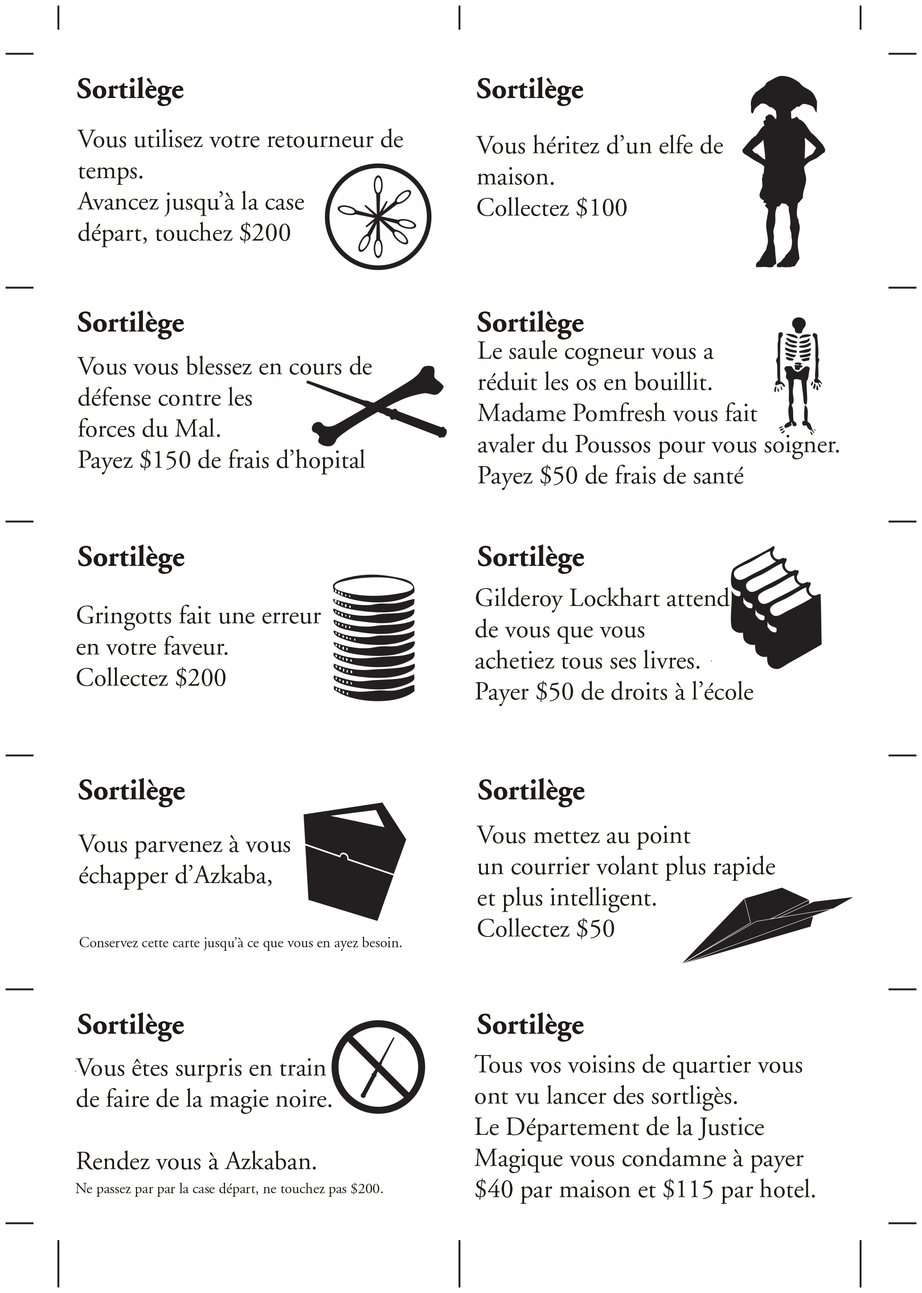
<style>
.page{position:relative;width:922px;height:1293px;background:#ffffff}
.page>*{position:absolute;margin:0}
.t1{font:29.7px "AGaramond-Bold";color:#1f1a17}
.t2{font:26px "AGaramond-Regular";color:#1f1a17}
.t3{font:14.9px "AGaramond-Regular";color:#1f1a17}
</style>
<div class="page">
<p class="t1" style="left:77px;top:77px;width:107px;height:29px">Sortilège</p>
<p class="t1" style="left:477px;top:77px;width:106px;height:29px">Sortilège</p>
<p class="t2" style="left:77px;top:128px;width:326px;height:119px">Vous utilisez votre retourneur de<br>temps.<br>Avancez jusqu’à la case<br>départ, touchez $200</p>
<p class="t2" style="left:476px;top:135px;width:247px;height:83px">Vous héritez d’un elfe de<br>maison.<br>Collectez $100</p>
<p class="t1" style="left:78px;top:310px;width:106px;height:30px">Sortilège</p>
<p class="t1" style="left:477px;top:310px;width:107px;height:30px">Sortilège</p>
<p class="t2" style="left:478px;top:340px;width:361px;height:150px">Le saule cogneur vous a<br>réduit les os en bouillit.<br>Madame Pomfresh vous fait<br>avaler du Poussos pour vous soigner.<br>Payez $50 de frais de santé</p>
<p class="t2" style="left:77px;top:356px;width:295px;height:119px">Vous vous blessez en cours de<br>défense contre les<br>forces du Mal.<br>Payez $150 de frais d’hopital</p>
<p class="t1" style="left:78px;top:545px;width:106px;height:29px">Sortilège</p>
<p class="t1" style="left:478px;top:545px;width:106px;height:29px">Sortilège</p>
<p class="t2" style="left:476px;top:587px;width:277px;height:119px">Gilderoy Lockhart attend<br>de vous que vous<br>achetiez tous ses livres.<br>Payer $50 de droits à l’école</p>
<p class="t2" style="left:77px;top:605px;width:244px;height:84px">Gringotts fait une erreur<br>en votre faveur.<br>Collectez $200</p>
<p class="t1" style="left:78px;top:778px;width:107px;height:30px">Sortilège</p>
<p class="t1" style="left:478px;top:778px;width:107px;height:30px">Sortilège</p>
<p class="t2" style="left:476px;top:826px;width:299px;height:113px">Vous mettez au point<br>un courrier volant plus rapide<br>et plus intelligent.<br>Collectez $50</p>
<p class="t2" style="left:78px;top:835px;width:212px;height:55px">Vous parvenez à vous<br>échapper d’Azkaba,</p>
<p class="t3" style="left:79px;top:937px;width:323px;height:14px">Conservez cette carte jusqu’à ce que vous en ayez besoin.</p>
<p class="t1" style="left:78px;top:1013px;width:106px;height:29px">Sortilège</p>
<p class="t1" style="left:477px;top:1013px;width:107px;height:29px">Sortilège</p>
<p class="t2" style="left:75px;top:1058px;width:257px;height:112px">Vous êtes surpris en train<br>de faire de la magie noire.<br><br>Rendez vous à Azkaban.</p>
<p class="t2" style="left:474px;top:1054px;width:341px;height:150px">Tous vos voisins de quartier vous<br>ont vu lancer des sortligès.<br>Le Département de la Justice<br>Magique vous condamne à payer<br>$40 par maison et $115 par hotel.</p>
<p class="t3" style="left:75px;top:1183px;width:308px;height:14px">Ne passez par par la case départ, ne touchez pas $200.</p>
</div>
